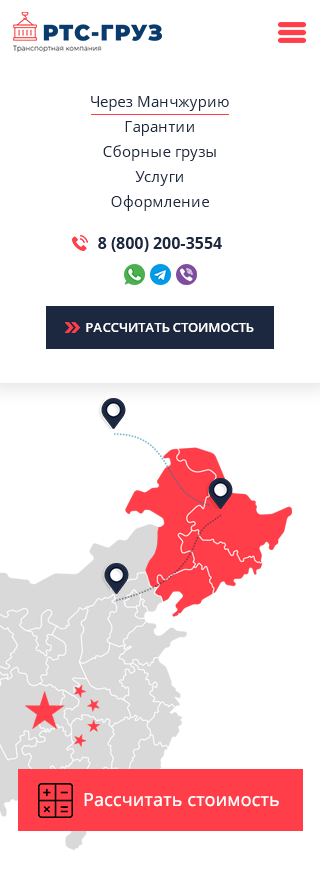
<style>
.page{position:relative;width:320px;height:882px;background:#ffffff}
.page>*{position:absolute;margin:0}
.t1{font:15px/25px "OpenSans";letter-spacing:0.01em;color:#1c2840}
.t2{font:16px "OpenSans-Bold";letter-spacing:0.01em;color:#1c2840}
.t3{font:13px "OpenSans-Semibold";letter-spacing:0.01em;color:#ffffff;text-transform:uppercase}
.t4{font:18px "OpenSans";letter-spacing:0.01em;color:#ffffff}
</style>
<div class="page">
<p class="t1" style="left:91px;top:96px;width:138px;height:115px;text-align:center">Через Манчжурию<br>Гарантии<br>Сборные грузы<br>Услуги<br>Оформление</p>
<p class="t2" style="left:98px;top:237px;width:124px;height:15px">8 (800) 200-3554</p>
<p class="t3" style="left:86px;top:323px;width:168px;height:9px">Рассчитать стоимость</p>
<p class="t4" style="left:84px;top:793px;width:195px;height:14px">Рассчитать стоимость</p>
</div>
